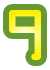
<style>
.page{position:relative;width:50px;height:70px;background:#ffffff}
.page>*{position:absolute;margin:0}
.t1{font:64px "OCRAStd"}
</style>
<div class="page">
<p class="t1" style="left:9px;top:10px;width:32px;height:50px">9</p>
</div>
